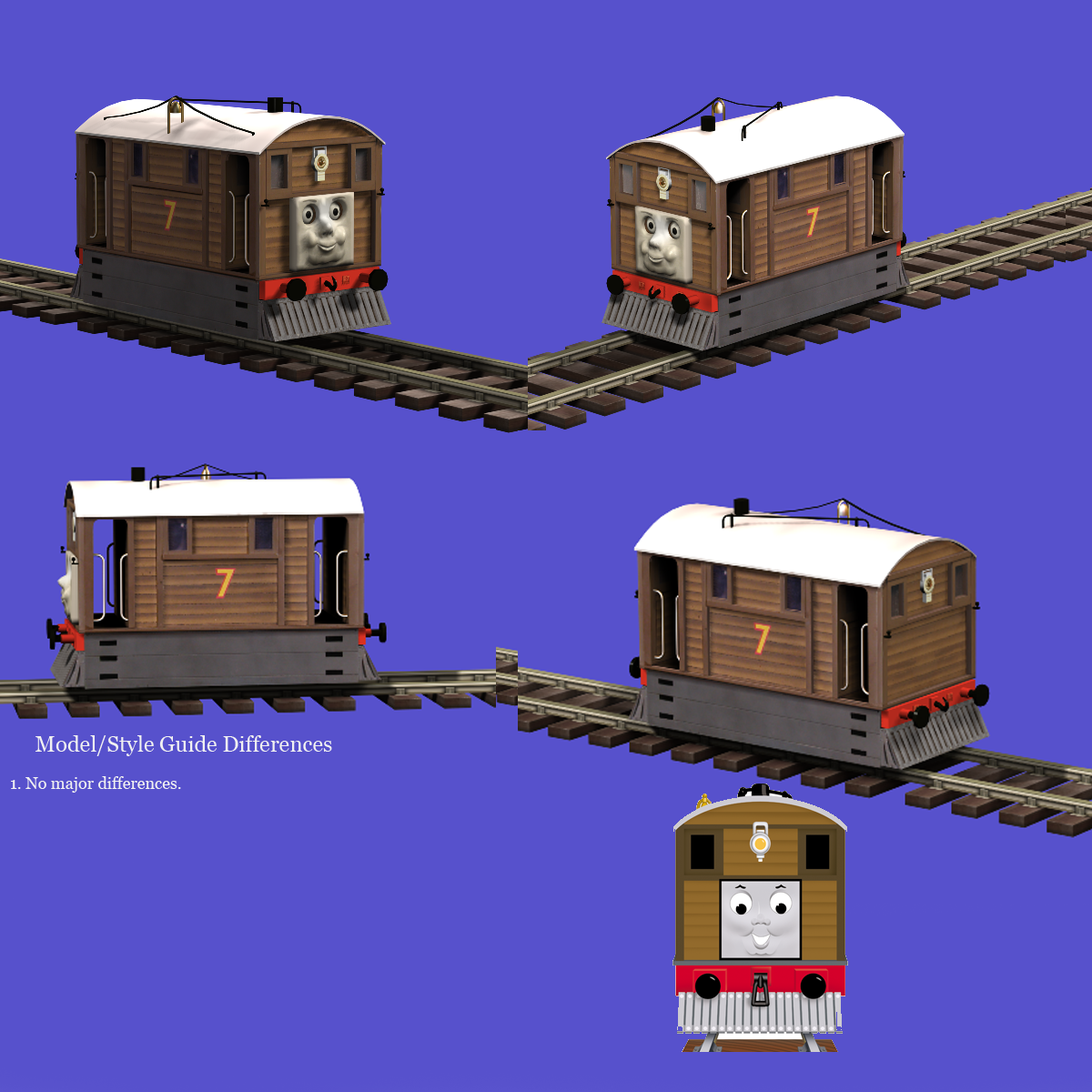
<style>
.page{position:relative;width:1092px;height:1092px;background:#5751cc}
.page>*{position:absolute;margin:0}
.t1{font:21.8px "Georgia";color:#f1f1f1}
.t2{font:16.4px "Georgia";color:#f1f1f1}
</style>
<div class="page">
<p class="t1" style="left:35px;top:735px;width:297px;height:21px">Model/Style Guide Differences</p>
<p class="t2" style="left:11px;top:776px;width:170px;height:17px">1. No major differences.</p>
</div>
